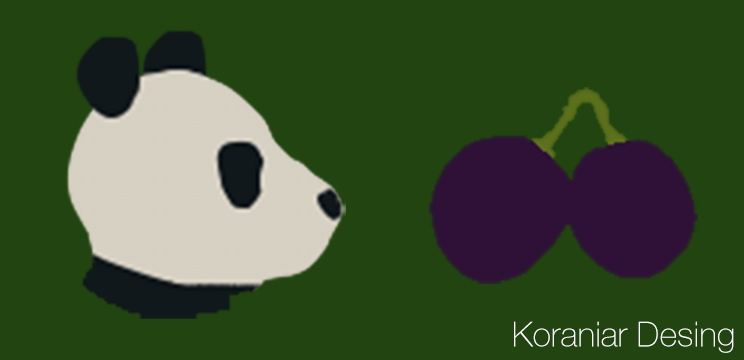
<style>
.page{position:relative;width:744px;height:360px;background:#214410}
.page>*{position:absolute;margin:0}
.t1{font:34px "HelveticaNeueThin";color:#ffffff}
</style>
<div class="page">
<p class="t1" style="left:514px;top:321px;width:220px;height:32px">Koraniar Desing</p>
</div>
